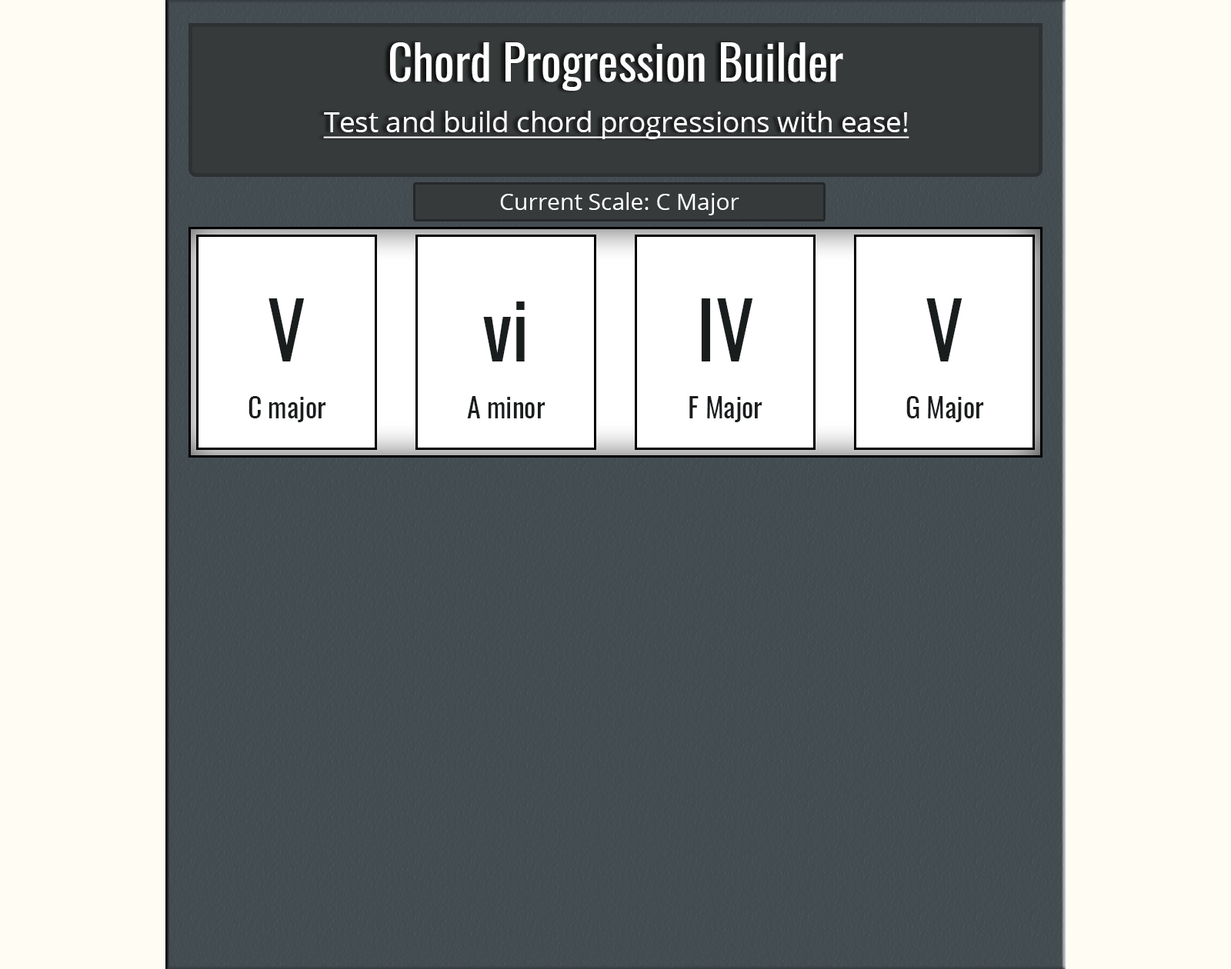
<style>
.page{position:relative;width:1231px;height:969px;background:#fffcf4}
.page>*{position:absolute;margin:0}
.t1{font:48.2px "Oswald-Regular";color:#ffffff}
.t2{font:28.1px "OpenSans";color:#ffffff;text-decoration:underline}
.t3{font:23.1px "OpenSans";color:#ffffff}
.t4{font:76.9px "Oswald-Regular";color:#1a1d1e}
.t5{font:27.7px "Oswald-Regular";color:#1a1d1e}
</style>
<div class="page">
<p class="t1" style="left:390px;top:42px;width:453px;height:49px">Chord Progression Builder</p>
<p class="t2" style="left:323px;top:111px;width:586px;height:28px">Test and build chord progressions with ease!</p>
<p class="t3" style="left:500px;top:192px;width:239px;height:23px">Current Scale: C Major</p>
<p class="t4" style="left:268px;top:298px;width:37px;height:63px">V</p>
<p class="t4" style="left:483px;top:301px;width:42px;height:60px">vi</p>
<p class="t4" style="left:701px;top:298px;width:52px;height:63px">IV</p>
<p class="t4" style="left:926px;top:298px;width:36px;height:63px">V</p>
<p class="t5" style="left:248px;top:396px;width:78px;height:26px">C major</p>
<p class="t5" style="left:467px;top:396px;width:78px;height:22px">A minor</p>
<p class="t5" style="left:689px;top:396px;width:73px;height:26px">F Major</p>
<p class="t5" style="left:906px;top:396px;width:78px;height:26px">G Major</p>
</div>
